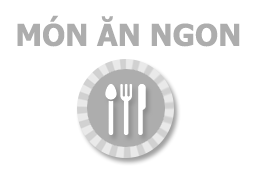
<style>
.page{position:relative;width:256px;height:192px;background:#ffffff}
.page>*{position:absolute;margin:0}
.t1{font:30px "Tahoma-Bold";color:#adadad}
</style>
<div class="page">
<p class="t1" style="left:17px;top:15px;width:223px;height:32px">MÓN ĂN NGON</p>
</div>
